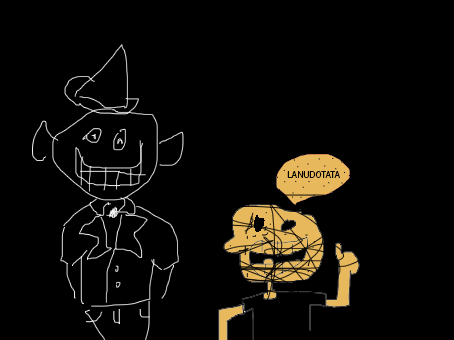
<style>
.page{position:relative;width:454px;height:340px;background:#000000}
.page>*{position:absolute;margin:0}
.t1{font:9.2px "MyriadPro-Regular";color:#000000}
</style>
<div class="page">
<p class="t1" style="left:287px;top:171px;width:53px;height:7px">LANUDOTATA</p>
</div>
